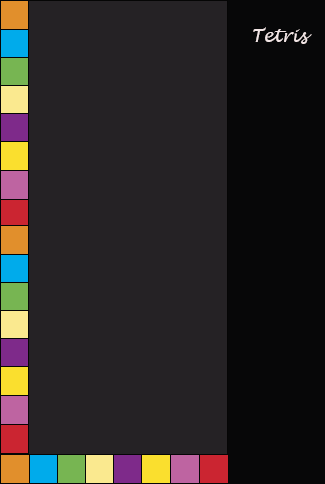
<style>
.page{position:relative;width:325px;height:484px;background:#252225}
.page>*{position:absolute;margin:0}
.t1{font:18px "LucidaHandwriting-Italic";color:#f2e5e5}
</style>
<div class="page">
<p class="t1" style="left:253px;top:27px;width:59px;height:17px">Tetris</p>
</div>
